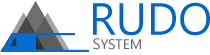
<style>
.page{position:relative;width:210px;height:55px;background:#ffffff}
.page>*{position:absolute;margin:0}
.t1{font:45px "KhmerUI";color:#0066cc}
.t2{font:14px "KhmerUI";color:#666666}
.t3{font:15px "KhmerUI";color:#666666}
</style>
<div class="page">
<p class="t1" style="left:93px;top:2px;width:117px;height:34px">RUDO</p>
<p class="t2" style="left:93px;top:38px;width:48px;height:12px"><span class="t3">S</span>YSTEM</p>
</div>
